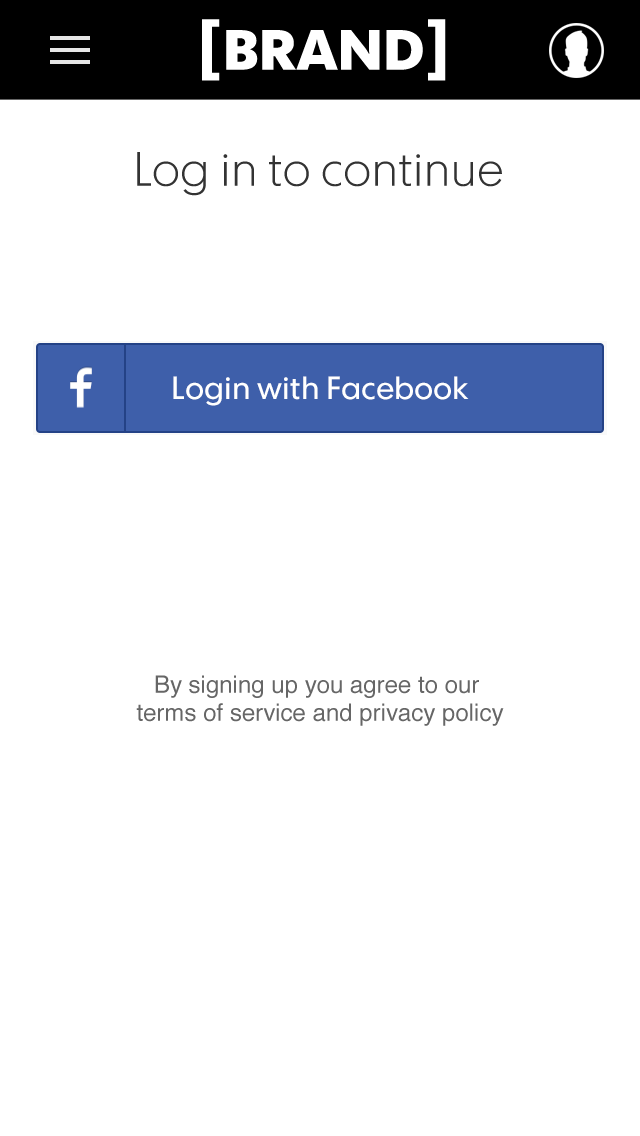
<style>
.page{position:relative;width:640px;height:1136px;background:#ffffff}
.page>*{position:absolute;margin:0}
.t1{font:56.6px "FuturaTodayScreen-Bold";color:#ffffff}
.t2{font:72px "FuturaTodayScreen-Bold";color:#ffffff}
.t3{font:48px "FuturaTodayScreen-Light";color:#333333}
.t4{font:24px/28px "Helvetica";color:#666666}
.t5{font:24px/18px "Helvetica";color:#666666}
</style>
<div class="page">
<p class="t1" style="left:202px;top:19px;width:244px;height:62px"><span class="t2">[</span>BRAND<span class="t2">]</span></p>
<p class="t3" style="left:137px;top:152px;width:365px;height:44px">Log in to continue</p>
<p class="t4" style="left:136px;top:675px;width:368px;height:51px;text-align:center"><span class="t5">By</span> signing up you agree to our <br>terms of service and privacy policy</p>
</div>
